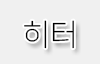
<style>
.page{position:relative;width:100px;height:64px;background:#f0f0f0}
.page>*{position:absolute;margin:0}
.t1{font:30px "NanumSquareL";color:#000000}
</style>
<div class="page">
<p class="t1" style="left:24px;top:20px;width:50px;height:29px">히터</p>
</div>
